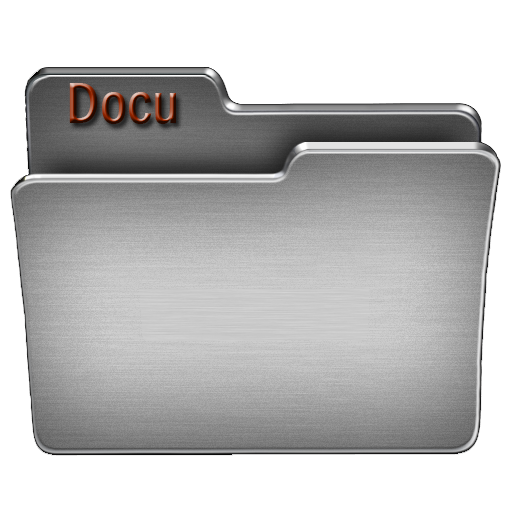
<style>
.page{position:relative;width:512px;height:512px;background:#ffffff}
.page>*{position:absolute;margin:0}
.t1{font:60px "FranklinGothic-MediumCond"}
</style>
<div class="page">
<p class="t1" style="left:69px;top:83px;width:107px;height:41px">Docu</p>
</div>
